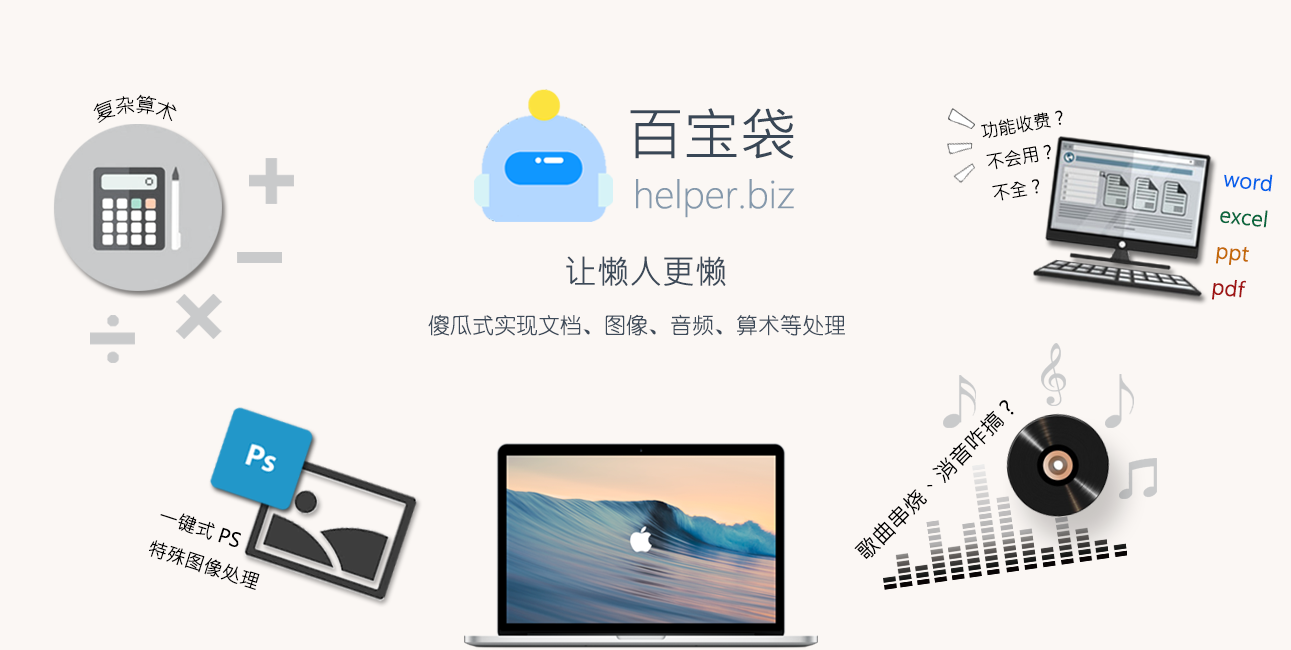
<style>
.page{position:relative;width:1291px;height:650px;background:#fbf7f4}
.page>*{position:absolute;margin:0}
.t1{font:21px "MicrosoftJhengHeiRegular";color:#000000;scale:0.84 1}
.t2{font:56.4px "MicrosoftJhengHeiRegular";color:#394756}
.t3{font:18.1px "MicrosoftJhengHeiRegular";color:#000000}
.t4{font:20.7px "MicrosoftJhengHeiRegular";color:#09673e}
.t5{font:20.7px "MicrosoftJhengHeiRegular";color:#0662eb}
.t6{font:20.7px "MicrosoftJhengHeiRegular";color:#c46908}
.t7{font:20.7px "MicrosoftJhengHeiRegular";color:#a01414}
.t8{font:36.4px "MicrosoftJhengHeiLight";color:#8599ac}
.t9{font:33px "MicrosoftJhengHeiRegular";color:#3d4a59}
.t10{font:22px "YouYuan";color:#3d4a59}
.t11{font:22px "MicrosoftJhengHeiRegular";color:#000000}
.t12{font:19.3px "MicrosoftJhengHeiRegular";color:#000000}
</style>
<div class="page">
<p class="t1" style="left:93px;top:94px;width:84px;height:29px">复杂算术</p>
<p class="t2" style="left:630px;top:108px;width:164px;height:51px">百宝袋</p>
<p class="t3" style="left:981px;top:110px;width:82px;height:91px;rotate:-10deg">功能收费？<br>不会用？<br>不全？</p>
<p class="t4" style="left:1212px;top:174px;width:61px;height:126px;rotate:6deg"><span class="t5">word<br></span>excel<br><span class="t6">ppt<br></span><span class="t7">pdf</span></p>
<p class="t8" style="left:636px;top:179px;width:159px;height:39px">helper.biz</p>
<p class="t9" style="left:566px;top:256px;width:160px;height:30px">让懒人更懒</p>
<p class="t10" style="left:428px;top:314px;width:417px;height:22px">傻瓜式实现文档、图像、音频、算术等处理</p>
<p class="t11" style="left:854px;top:400px;width:160px;height:159px;rotate:-45deg">歌曲串烧、消音咋搞?</p>
<p class="t12" style="left:149px;top:513px;width:111px;height:77px;rotate:18deg">一键式PS<br>特殊图像处理</p>
</div>
